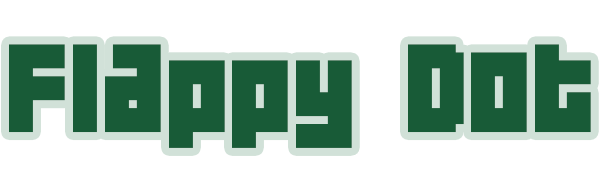
<style>
.page{position:relative;width:600px;height:180px;background:#ffffff}
.page>*{position:absolute;margin:0}
.t1{font:111.5px "04b19";color:#185b37}
</style>
<div class="page">
<p class="t1" style="left:9px;top:44px;width:582px;height:104px">Flappy Dot</p>
</div>
